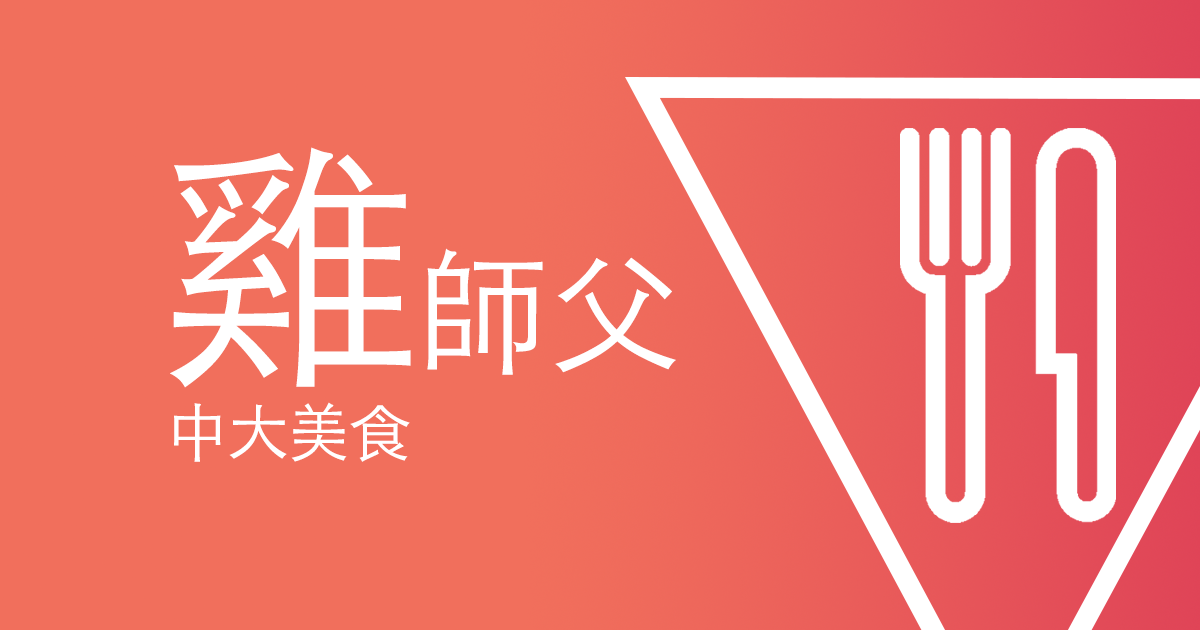
<style>
.page{position:relative;width:1200px;height:630px;background:#f16f5c}
.page>*{position:absolute;margin:0}
.t1{font:133.3px "STHeitiTC-Light";letter-spacing:-0.02em;color:#ffffff}
.t2{font:266.7px "STHeitiTC-Light";letter-spacing:-0.02em;color:#ffffff}
.t3{font:62.2px "STHeitiTC-Light";letter-spacing:-0.02em;color:#ffffff}
</style>
<div class="page">
<p class="t1" style="left:170px;top:147px;width:506px;height:241px"><span class="t2">雞</span>師父</p>
<p class="t3" style="left:174px;top:402px;width:236px;height:60px">中大美食</p>
</div>
